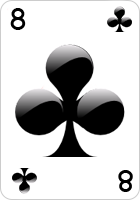
<style>
.page{position:relative;width:140px;height:200px;background:#ffffff}
.page>*{position:absolute;margin:0}
.t1{font:26px "CardCharacters";color:#000000}
</style>
<div class="page">
<p class="t1" style="left:10px;top:8px;width:16px;height:22px">8</p>
<p class="t1" style="left:118px;top:170px;width:15px;height:22px;rotate:180deg">8</p>
</div>
